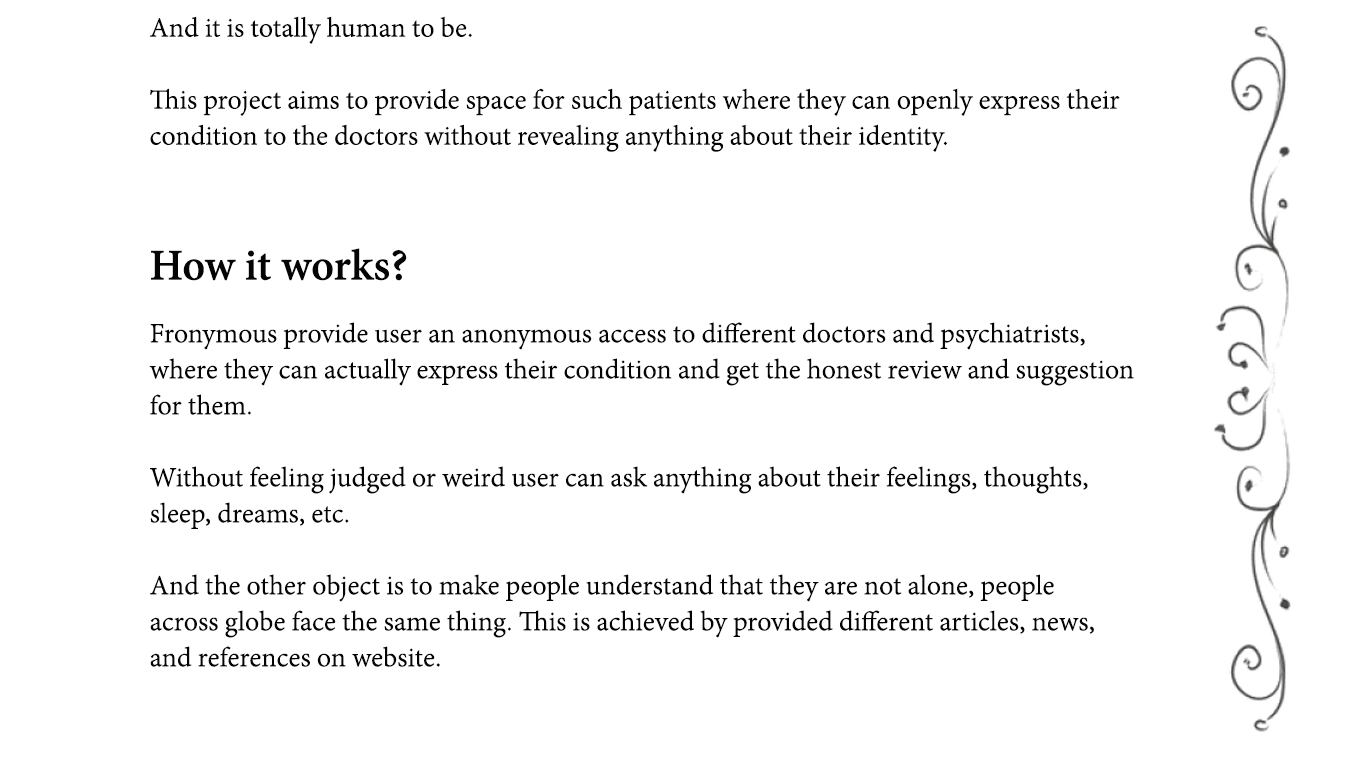
<style>
.page{position:relative;width:1366px;height:768px;background:#ffffff}
.page>*{position:absolute;margin:0}
.t1{font:30px "AdobeDevanagari-Regular";color:#040404}
.t2{font:48px "AdobeDevanagari-Bold";color:#040404}
</style>
<div class="page">
<p class="t1" style="left:150px;top:16px;width:970px;height:136px">And it is totally human to be.<br><br>This project aims to provide space for such patients where they can openly express their <br>condition to the doctors without revealing anything about their identity.</p>
<p class="t2" style="left:151px;top:248px;width:256px;height:33px">How it works?</p>
<p class="t1" style="left:149px;top:322px;width:985px;height:345px">Fronymous provide user an anonymous access to different doctors and psychiatrists, <br>where they can actually express their condition and get the honest review and suggestion<br>for them.<br><br>Without feeling judged or weird user can ask anything about their feelings, thoughts,<br>sleep, dreams, etc.<br><br>And the other object is to make people understand that they are not alone, people <br>across globe face the same thing. This is achieved by provided different articles, news, <br>and references on website.</p>
</div>
